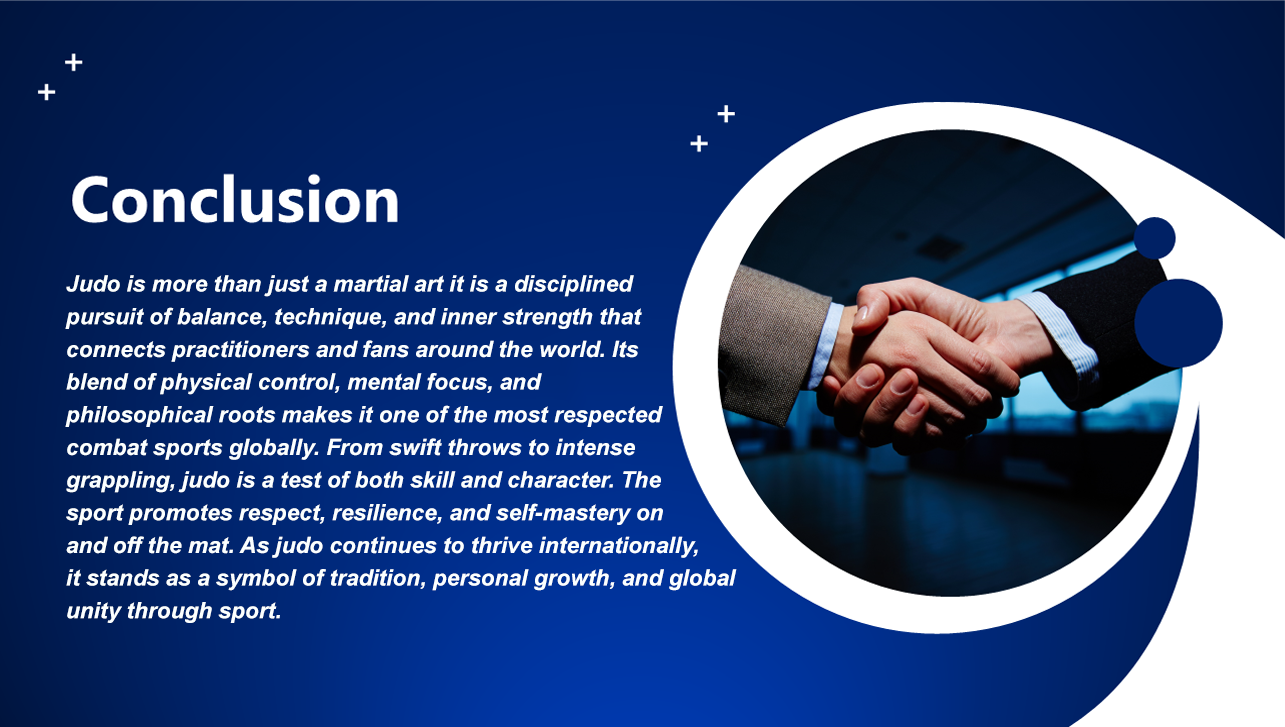
<style>
.page{position:relative;width:1285px;height:727px}
.page>*{position:absolute;margin:0}
.t1{font:22.7px/32.7px "Arial-BoldItalicMT";color:#fbffff}
</style>
<div class="page">
<p class="t1" style="left:65px;top:275px;width:672px;height:348px">Judo is more than just a martial art it is a disciplined <br>pursuit of balance, technique, and inner strength that <br>connects practitioners and fans around the world. Its <br>blend of physical control, mental focus, and <br>philosophical roots makes it one of the most respected<br>combat sports globally. From swift throws to intense <br>grappling, judo is a test of both skill and character. The <br>sport promotes respect, resilience, and self-mastery on <br>and off the mat. As judo continues to thrive internationally,<br>it stands as a symbol of tradition, personal growth, and global <br>unity through sport.</p>
</div>
